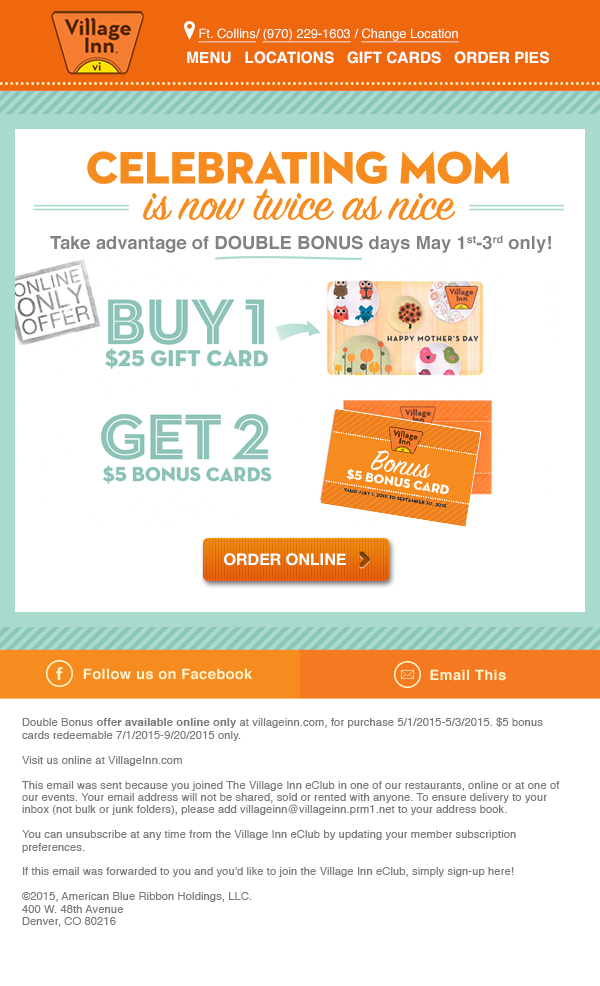
<style>
.page{position:relative;width:600px;height:986px;background:#ffffff}
.page>*{position:absolute;margin:0}
.t1{font:12.9px "Helvetica";color:#fdfdfd;text-decoration:underline}
.t2{font:12.9px "Helvetica";color:#fdfdfd}
.t3{font:15.4px "Helvetica-Bold";color:#fdfdfd}
.t4{font:18px "Helvetica-Bold";color:#818181}
.t5{font:18px "Helvetica-Bold";color:#818181;text-transform:uppercase}
.t6{font:16px "HelveticaNeue-Bold";color:#ffffff;text-transform:uppercase}
.t7{font:14.3px "Helvetica-Bold";letter-spacing:0.03em;color:#fff4c9}
.t8{font:11.1px/12.4px "Helvetica";letter-spacing:0.01em;color:#797979}
.t9{font:11.1px/12.4px "Helvetica-Bold";letter-spacing:0.01em;color:#797979}
</style>
<div class="page">
<p class="t1" style="left:198px;top:28px;width:261px;height:15px">Ft. Collins<span class="t2">/ </span>(970) 229-1603<span class="t2"> / </span>Change Location</p>
<p class="t3" style="left:187px;top:51px;width:362px;height:13px">MENU   LOCATIONS   GIFT CARDS   ORDER PIES</p>
<p class="t4" style="left:50px;top:235px;width:501px;height:18px">Take advantage of <span class="t5">double bonus</span> days May 1st-3rd only!</p>
<p class="t6" style="left:224px;top:553px;width:122px;height:13px">Order Online</p>
<p class="t7" style="left:83px;top:668px;width:169px;height:12px">Follow us on Facebook</p>
<p class="t7" style="left:430px;top:669px;width:76px;height:12px">Email This</p>
<p class="t8" style="left:22px;top:717px;width:538px;height:210px">Double Bonus <span class="t9">offer available online only</span> at villageinn.com, for purchase 5/1/2015-5/3/2015. $5 bonus cards redeemable 7/1/2015-9/20/2015 only.<br><br>Visit us online at VillageInn.com<br><br>This email was sent because you joined The Village Inn eClub in one of our restaurants, online or at one of our events. Your email address will not be shared, sold or rented with anyone. To ensure delivery to your inbox (not bulk or junk folders), please add villageinn@villageinn.prm1.net to your address book.<br><br>You can unsubscribe at any time from the Village Inn eClub by updating your member subscription preferences.<br><br>If this email was forwarded to you and you'd like to join the Village Inn eClub, simply sign-up here!<br><br>©2015, American Blue Ribbon Holdings, LLC.<br>400 W. 48th Avenue<br>Denver, CO 80216</p>
</div>
